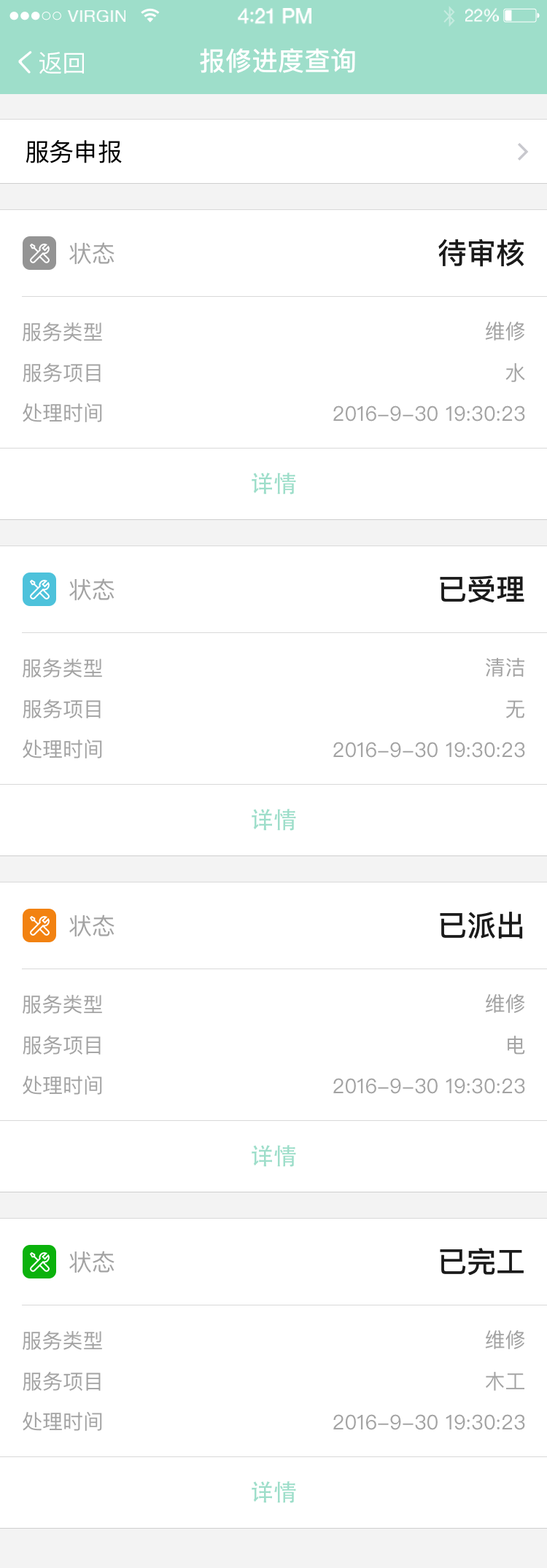
<style>
.page{position:relative;width:547px;height:1568px;background:#ffffff}
.page>*{position:absolute;margin:0}
.t1{font:17.1px "HelveticaNeue";letter-spacing:0.02em;color:#ffffff}
.t2{font:20.5px "HelveticaNeue-Medium";letter-spacing:-0.02em;color:#ffffff}
.t3{font:20.5px "Avenir-Medium";letter-spacing:-0.02em;color:#ffffff}
.t4{font:17.2px "HelveticaNeue";letter-spacing:-0.02em;color:#ffffff}
.t5{font:24.3px "PingFangSC-Medium";color:#ffffff}
.t6{font:26.3px "PingFangSC-Medium";color:#ffffff}
.t7{font:24.8px "PingFangSC-Regular";letter-spacing:-0.026em;color:#000000}
.t8{font:23.3px "PingFangSC-Regular";color:#a3a3a3}
.t9{font:29.2px "PingFangSC-Medium";color:#1a1a1a}
.t10{font:20.4px "PingFangSC-Regular";color:#a3a3a3}
.t11{font:23.3px "AdobeHeitiStd-Regular";color:#9edeca}
</style>
<div class="page">
<p class="t1" style="left:66px;top:10px;width:59px;height:12px">VIRGIN</p>
<p class="t2" style="left:238px;top:8px;width:73px;height:16px">4<span class="t3">:</span>21 PM</p>
<p class="t4" style="left:465px;top:8px;width:34px;height:14px">22%</p>
<p class="t5" style="left:39px;top:52px;width:45px;height:22px">返回</p>
<p class="t6" style="left:200px;top:48px;width:155px;height:25px">报修进度查询</p>
<p class="t7" style="left:26px;top:140px;width:96px;height:23px">服务申报</p>
<p class="t8" style="left:69px;top:242px;width:46px;height:23px">状态</p>
<p class="t9" style="left:438px;top:238px;width:86px;height:29px">待审核</p>
<p class="t10" style="left:23px;top:322px;width:79px;height:19px">服务类型</p>
<p class="t10" style="left:485px;top:322px;width:40px;height:19px">维修</p>
<p class="t10" style="left:23px;top:363px;width:78px;height:19px">服务项目</p>
<p class="t10" style="left:505px;top:363px;width:20px;height:19px">水</p>
<p class="t10" style="left:23px;top:403px;width:79px;height:19px">处理时间</p>
<p class="t10" style="left:333px;top:405px;width:192px;height:17px">2016-9-30 19:30:23</p>
<p class="t11" style="left:252px;top:473px;width:44px;height:21px">详情</p>
<p class="t8" style="left:69px;top:578px;width:46px;height:23px">状态</p>
<p class="t9" style="left:440px;top:575px;width:84px;height:28px">已受理</p>
<p class="t10" style="left:23px;top:659px;width:79px;height:19px">服务类型</p>
<p class="t10" style="left:486px;top:658px;width:38px;height:19px">清洁</p>
<p class="t10" style="left:23px;top:699px;width:78px;height:19px">服务项目</p>
<p class="t10" style="left:506px;top:700px;width:18px;height:18px">无</p>
<p class="t10" style="left:23px;top:740px;width:79px;height:18px">处理时间</p>
<p class="t10" style="left:333px;top:742px;width:192px;height:16px">2016-9-30 19:30:23</p>
<p class="t11" style="left:252px;top:809px;width:44px;height:22px">详情</p>
<p class="t8" style="left:69px;top:915px;width:46px;height:22px">状态</p>
<p class="t9" style="left:440px;top:912px;width:83px;height:27px">已派出</p>
<p class="t10" style="left:23px;top:995px;width:79px;height:19px">服务类型</p>
<p class="t10" style="left:485px;top:994px;width:40px;height:19px">维修</p>
<p class="t10" style="left:23px;top:1036px;width:78px;height:19px">服务项目</p>
<p class="t10" style="left:508px;top:1036px;width:17px;height:19px">电</p>
<p class="t10" style="left:23px;top:1076px;width:79px;height:19px">处理时间</p>
<p class="t10" style="left:333px;top:1078px;width:192px;height:16px">2016-9-30 19:30:23</p>
<p class="t11" style="left:252px;top:1145px;width:44px;height:22px">详情</p>
<p class="t8" style="left:69px;top:1251px;width:46px;height:22px">状态</p>
<p class="t9" style="left:440px;top:1248px;width:84px;height:28px">已完工</p>
<p class="t10" style="left:23px;top:1331px;width:79px;height:19px">服务类型</p>
<p class="t10" style="left:485px;top:1330px;width:40px;height:19px">维修</p>
<p class="t10" style="left:23px;top:1372px;width:78px;height:19px">服务项目</p>
<p class="t10" style="left:486px;top:1372px;width:38px;height:19px">木工</p>
<p class="t10" style="left:23px;top:1412px;width:79px;height:19px">处理时间</p>
<p class="t10" style="left:333px;top:1414px;width:192px;height:16px">2016-9-30 19:30:23</p>
<p class="t11" style="left:252px;top:1481px;width:44px;height:22px">详情</p>
</div>
